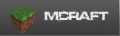
<style>
.page{position:relative;width:120px;height:36px}
.page>*{position:absolute;margin:0}
.t1{font:12px "Defused-ExtendedBold";color:#eaeaea}
</style>
<div class="page">
<p class="t1" style="left:43px;top:10px;width:66px;height:12px">MCRAFT</p>
</div>
